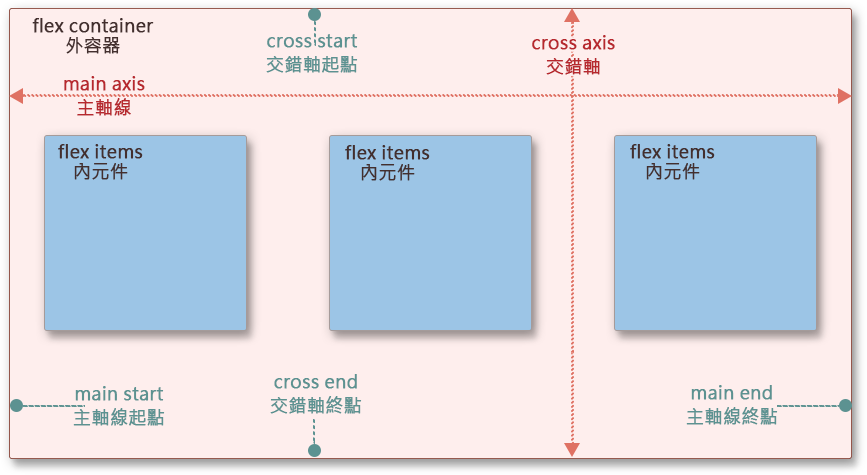
<style>
.page{position:relative;width:867px;height:475px;background:#feeeed}
.page>*{position:absolute;margin:0}
.t1{font:18px/20px "MicrosoftJhengHeiRegular";color:#432f2e;font-weight:bold}
.t2{font:18px/24px "MicrosoftJhengHeiRegular";color:#5c9291;font-weight:bold}
.t3{font:18px/24px "MicrosoftJhengHeiRegular";color:#b7282e;font-weight:bold}
</style>
<div class="page">
<p class="t1" style="left:32px;top:18px;width:122px;height:36px;text-align:center">flex container<br>外容器</p>
<p class="t2" style="left:266px;top:34px;width:92px;height:39px;text-align:center">cross start<br>交錯軸起點</p>
<p class="t3" style="left:532px;top:35px;width:83px;height:40px;text-align:center">cross axis<br>交錯軸</p>
<p class="t3" style="left:64px;top:76px;width:81px;height:40px;text-align:center">main axis<br>主軸線</p>
<p class="t1" style="left:58px;top:144px;width:85px;height:36px;text-align:center">flex items<br>內元件</p>
<p class="t1" style="left:345px;top:145px;width:85px;height:36px;text-align:center">flex items<br>內元件</p>
<p class="t1" style="left:630px;top:144px;width:85px;height:36px;text-align:center">flex items<br>內元件</p>
<p class="t2" style="left:270px;top:374px;width:92px;height:40px;text-align:center">cross end<br>交錯軸終點</p>
<p class="t2" style="left:73px;top:386px;width:92px;height:40px;text-align:center">main start<br>主軸線起點</p>
<p class="t2" style="left:686px;top:385px;width:92px;height:40px;text-align:center">main end<br>主軸線終點</p>
</div>
